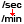
<style>
.page{position:relative;width:24px;height:24px;background:#ffffff}
.page>*{position:absolute;margin:0}
.t1{font:10px "ArialMT";color:#000000;scale:1.06 1}
</style>
<div class="page">
<p class="t1" style="left:2px;top:1px;width:20px;height:7px">/sec</p>
<p class="t1" style="left:1px;top:15px;width:21px;height:7px">/min</p>
</div>
